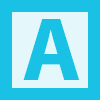
<style>
.page{position:relative;width:100px;height:100px;background:#19c2e5}
.page>*{position:absolute;margin:0}
.t1{font:90px "MyriadPro-Bold";color:#19c2e5}
</style>
<div class="page">
<p class="t1" style="left:23px;top:19px;width:57px;height:61px">A</p>
</div>
